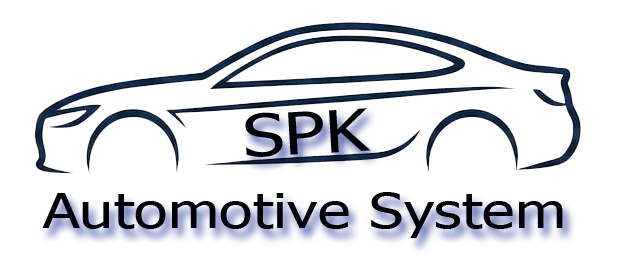
<style>
.page{position:relative;width:618px;height:277px;background:#ffffff}
.page>*{position:absolute;margin:0}
.t1{font:58px "Tahoma";color:#000206;scale:1.27 1}
.t2{font:48.3px "Tahoma";color:#000206;scale:1.27 1}
</style>
<div class="page">
<p class="t1" style="left:245px;top:108px;width:126px;height:49px;rotate:-3deg">SPK</p>
<p class="t2" style="left:42px;top:192px;width:521px;height:46px">Automotive System</p>
</div>
